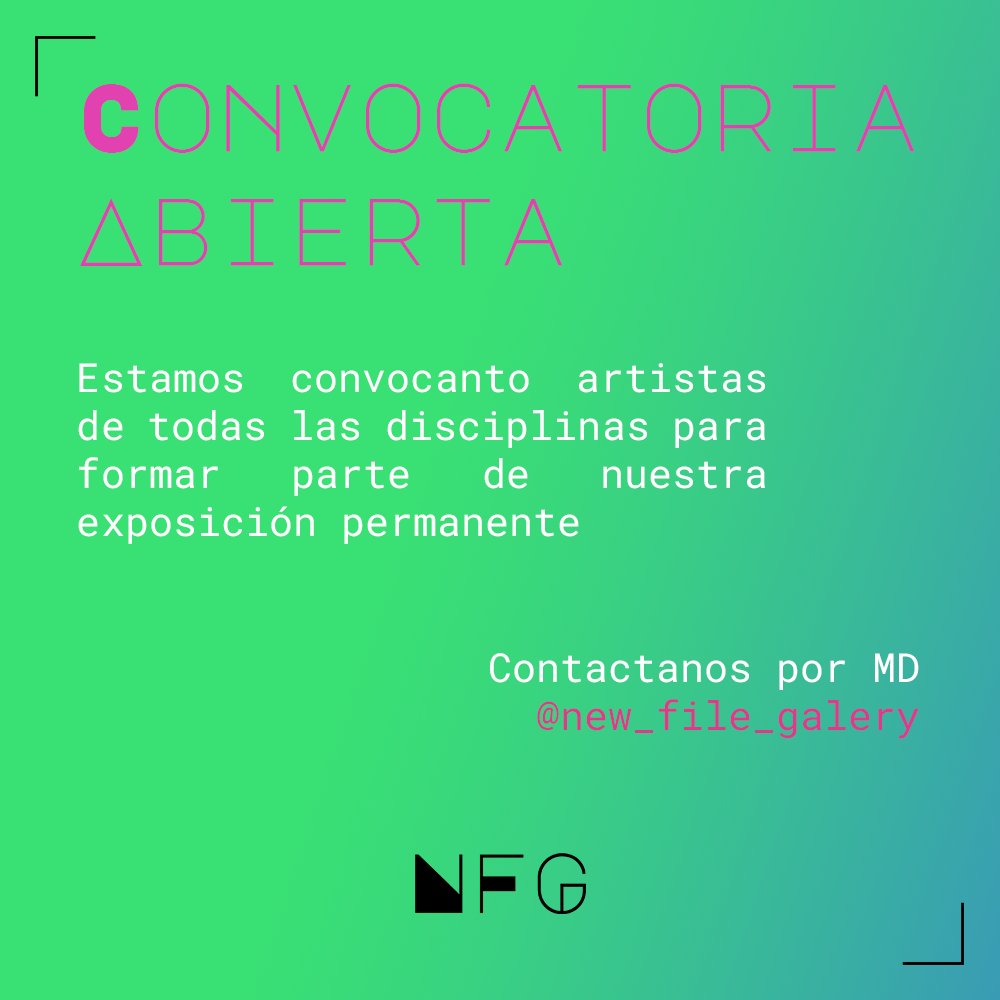
<style>
.page{position:relative;width:1000px;height:1000px;background:#39e074}
.page>*{position:absolute;margin:0}
.t1{font:95px "MajorMonoDisplay-Regular";color:#e142af}
.t2{font:40px "RobotoMono-Regular";color:#ffffff}
.t3{font:40px "RobotoMono-Regular";color:#e0398c}
</style>
<div class="page">
<p class="t1" style="left:80px;top:83px;width:835px;height:183px">Convocatoria<br>Abierta</p>
<p class="t2" style="left:78px;top:363px;width:687px;height:181px;text-align:justify">Estamos convocanto artistas de todas las disciplinas para formar parte de nuestra exposición permanente</p>
<p class="t2" style="left:490px;top:653px;width:429px;height:86px;text-align:justify">Contactanos por MD<br><span class="t3">@new_file_galery</span></p>
</div>
